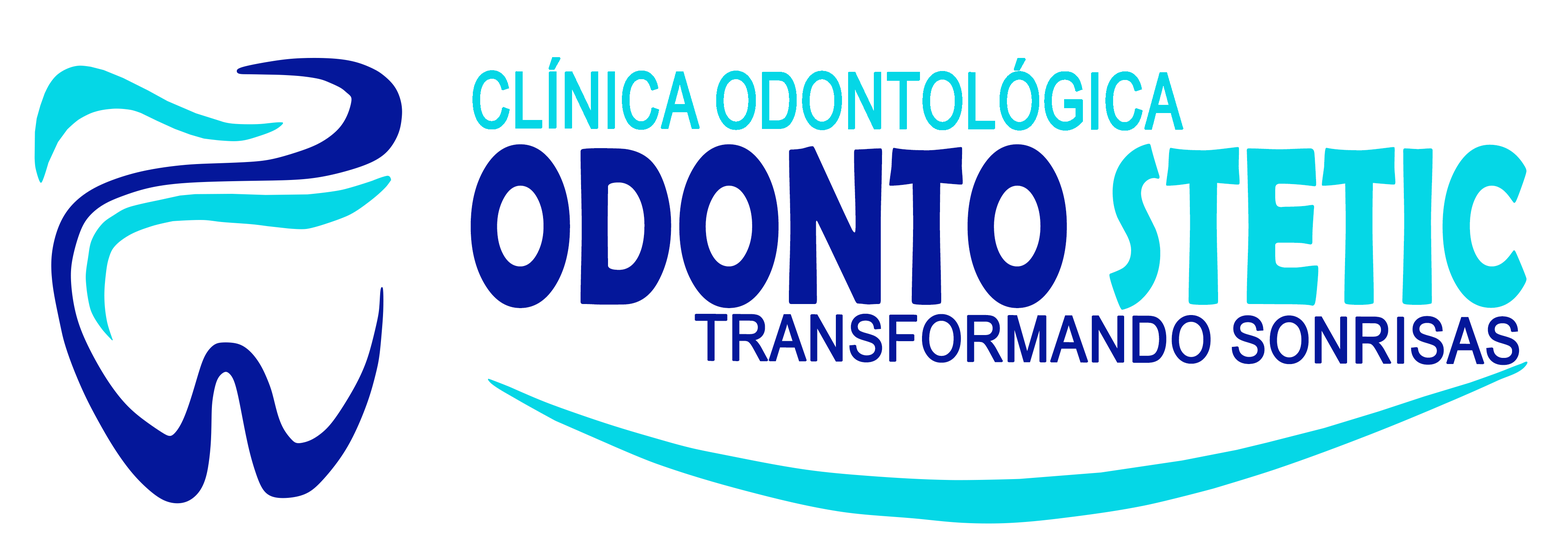
<style>
.page{position:relative;width:1568px;height:555px;background:#ffffff}
.page>*{position:absolute;margin:0}
.t1{font:77.3px "ArialNarrow";color:#05d7e6;font-weight:bold;scale:0.87 1}
.t2{font:227.1px "BerlinSansFBDemi-Bold";color:#04179a;scale:0.63 1}
.t3{font:227.1px "BerlinSansFBDemi-Bold";color:#05d7e6;scale:0.63 1}
.t4{font:63.6px "ArialNarrow";color:#04179a;font-weight:bold;scale:1.03 1}
</style>
<div class="page">
<p class="t1" style="left:472px;top:57px;width:711px;height:74px">CLÍNICA ODONTOLÓGICA</p>
<p class="t2" style="left:470px;top:144px;width:1057px;height:166px">ODONTO <span class="t3">STETIC</span></p>
<p class="t4" style="left:695px;top:314px;width:824px;height:51px">TRANSFORMANDO SONRISAS</p>
</div>
